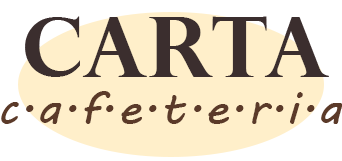
<style>
.page{position:relative;width:342px;height:161px;background:#ffefca}
.page>*{position:absolute;margin:0}
.t1{font:83.3px "PerpetuaTitlingMT-Bold";color:#3b2e2e}
.t2{font:45.9px "MVBoli";color:#5b3a29;scale:1.09 1}
</style>
<div class="page">
<p class="t1" style="left:25px;top:16px;width:304px;height:61px">CARTA</p>
<p class="t2" style="left:1px;top:91px;width:342px;height:33px">c.a.f.e.t.e.r.i.a</p>
</div>
